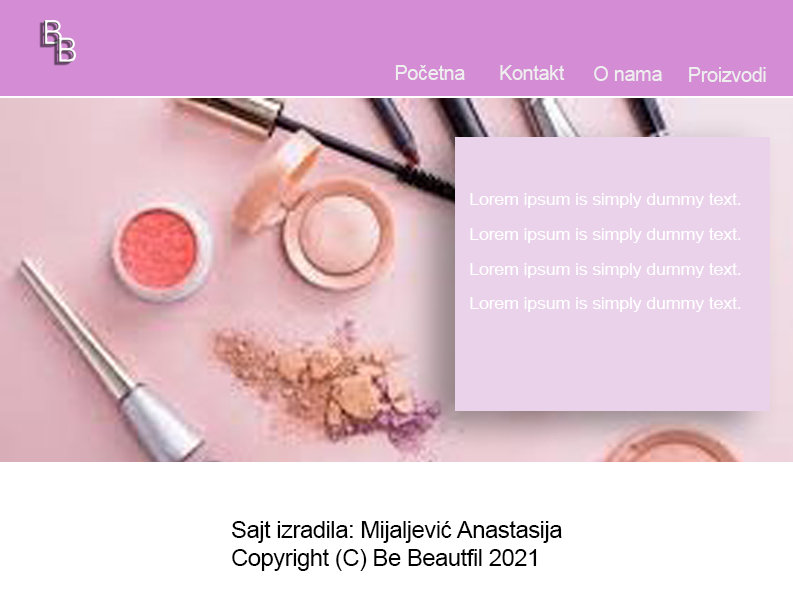
<style>
.page{position:relative;width:793px;height:593px;background:#ffffff}
.page>*{position:absolute;margin:0}
.t1{font:20px "ArialMT";letter-spacing:-0.02em;color:#eeeeee}
.t2{font:20.3px "ArialMT";letter-spacing:-0.02em;color:#eeeeee}
.t3{font:17.3px/34.7px "ArialMT";letter-spacing:-0.02em;color:#ffffff;scale:1.05 1}
.t4{font:22.7px/28.1px "ArialMT";letter-spacing:-0.02em;color:#000000;scale:1.05 1}
</style>
<div class="page">
<p class="t1" style="left:395px;top:65px;width:70px;height:15px">Početna</p>
<p class="t2" style="left:500px;top:65px;width:65px;height:15px">Kontakt</p>
<p class="t1" style="left:594px;top:66px;width:68px;height:15px">O nama</p>
<p class="t1" style="left:689px;top:67px;width:77px;height:15px">Proizvodi</p>
<p class="t3" style="left:470px;top:193px;width:271px;height:119px">Lorem ipsum is simply dummy text.<br>Lorem ipsum is simply dummy text.<br>Lorem ipsum is simply dummy text.<br>Lorem ipsum is simply dummy text.</p>
<p class="t4" style="left:232px;top:521px;width:330px;height:50px">Sajt izradila: Mijaljević Anastasija<br>Copyright (C) Be Beautfil 2021</p>
</div>
